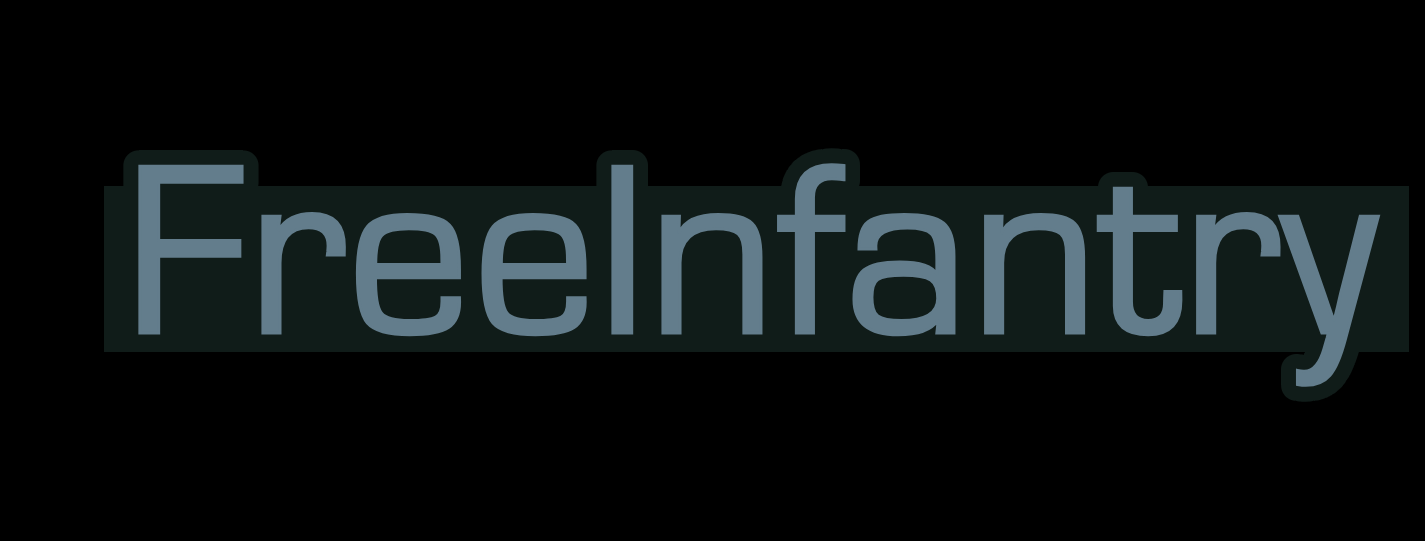
<style>
.page{position:relative;width:1425px;height:541px;background:#000000}
.page>*{position:absolute;margin:0}
.t1{font:250px "EurostileRegular";color:#637d8c}
</style>
<div class="page">
<p class="t1" style="left:137px;top:162px;width:1244px;height:226px">FreeInfantry</p>
</div>
